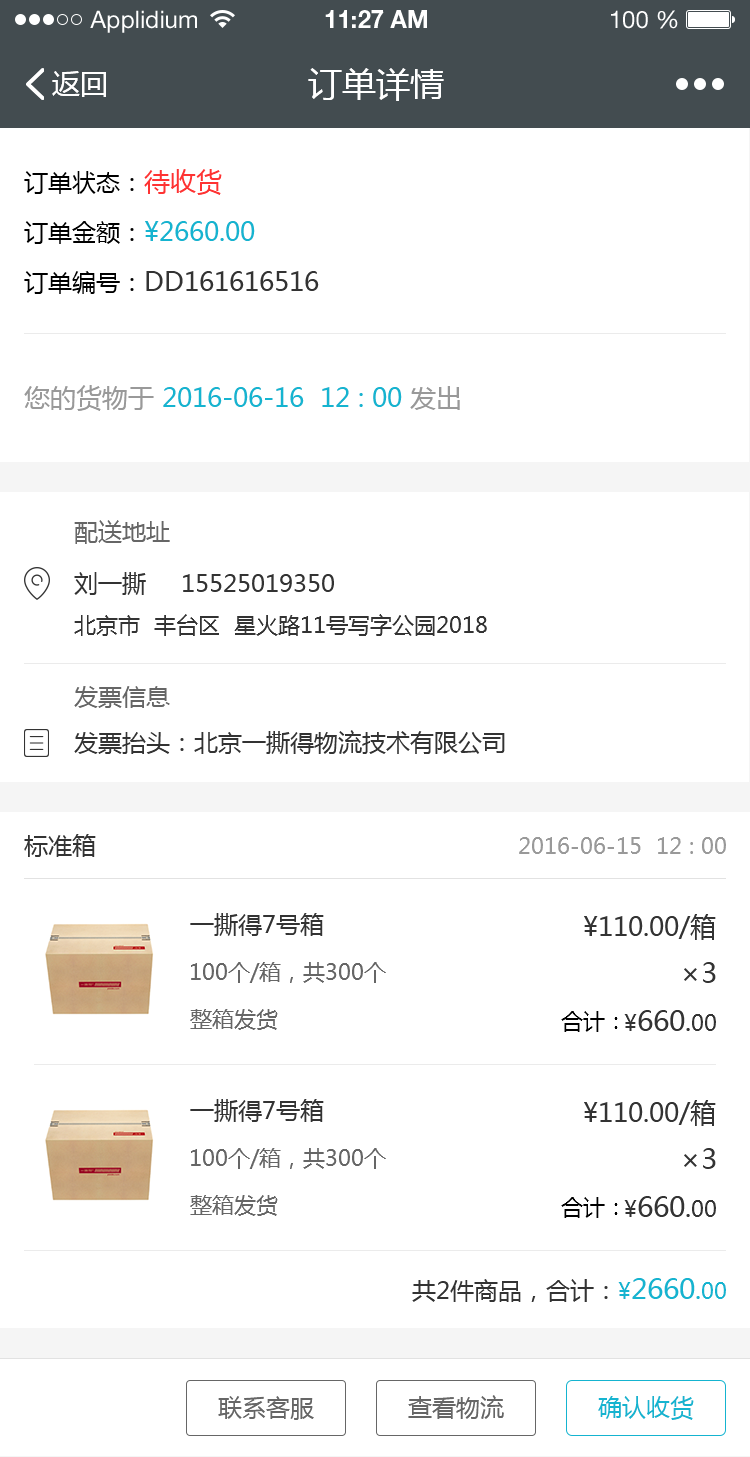
<style>
.page{position:relative;width:750px;height:1457px;background:#ffffff}
.page>*{position:absolute;margin:0}
.t1{font:24px "HelveticaNeueLTStd-Roman";color:#ffffff}
.t2{font:24px "HelveticaNeueLTStd-Bd";color:#ffffff}
.t3{font:28px "MicrosoftYaHei";color:#ffffff}
.t4{font:34px "MicrosoftYaHei";color:#ffffff}
.t5{font:26px/50px "MicrosoftYaHei";color:#333333}
.t6{font:24px/50px "MicrosoftYaHei";color:#000000}
.t7{font:26px/50px "MicrosoftYaHei";color:#fe3333}
.t8{font:26px/50px "MicrosoftYaHei";color:#15b4d0}
.t9{font:26px "MicrosoftYaHei";color:#15b4d0}
.t10{font:26px "MicrosoftYaHei";color:#999999}
.t11{font:24px "MicrosoftYaHei";color:#666666}
.t12{font:24px "MicrosoftYaHei";color:#333333}
.t13{font:22px "MicrosoftYaHei";color:#333333}
.t14{font:22px "MicrosoftYaHei";color:#999999}
.t15{font:26px "MicrosoftYaHei";color:#333333}
.t16{font:22px "MicrosoftYaHei";color:#666666}
.t17{font:28px "MicrosoftYaHei";color:#333333}
.t18{font:22px "MicrosoftYaHei";color:#000000}
.t19{font:22px "MicrosoftYaHei";color:#15b4d0}
.t20{font:28px "MicrosoftYaHei";color:#15b4d0}
.t21{font:24px "MicrosoftYaHei";color:#15b4d0}
</style>
<div class="page">
<p class="t1" style="left:90px;top:10px;width:107px;height:23px">Applidium</p>
<p class="t2" style="left:325px;top:10px;width:102px;height:18px">11:27 AM</p>
<p class="t1" style="left:611px;top:10px;width:67px;height:19px">100 %</p>
<p class="t3" style="left:52px;top:71px;width:54px;height:26px">返回</p>
<p class="t4" style="left:308px;top:68px;width:136px;height:33px">订单详情</p>
<p class="t5" style="left:24px;top:169px;width:295px;height:125px"><span class="t6">订单状态：</span><span class="t7">待收货<br></span><span class="t6">订单金额：</span><span class="t8">¥2660.00<br></span><span class="t6">订单编号：</span>DD161616516</p>
<p class="t9" style="left:24px;top:385px;width:436px;height:26px"><span class="t10">您的货物于 </span>2016-06-16  12 : 00 <span class="t10">发出</span></p>
<p class="t11" style="left:74px;top:520px;width:96px;height:24px">配送地址</p>
<p class="t12" style="left:74px;top:572px;width:260px;height:23px">刘一撕     15525019350</p>
<p class="t13" style="left:74px;top:614px;width:413px;height:22px">北京市  丰台区  星火路11号写字公园2018</p>
<p class="t11" style="left:74px;top:686px;width:96px;height:22px">发票信息</p>
<p class="t12" style="left:74px;top:730px;width:431px;height:24px">发票抬头：北京一撕得物流技术有限公司</p>
<p class="t12" style="left:24px;top:834px;width:72px;height:23px">标准箱</p>
<p class="t14" style="left:519px;top:837px;width:207px;height:17px">2016-06-15  12 : 00</p>
<p class="t12" style="left:190px;top:913px;width:134px;height:23px">一撕得7号箱</p>
<p class="t15" style="left:584px;top:914px;width:132px;height:26px">¥110.00/箱</p>
<p class="t16" style="left:191px;top:962px;width:195px;height:21px">100个/箱，共300个</p>
<p class="t17" style="left:684px;top:962px;width:32px;height:21px">×3</p>
<p class="t16" style="left:190px;top:1009px;width:88px;height:21px">整箱发货</p>
<p class="t18" style="left:561px;top:1011px;width:57px;height:21px">合计：</p>
<p class="t17" style="left:624px;top:1010px;width:92px;height:21px"><span class="t13">¥</span>660<span class="t15">.</span><span class="t13">00</span></p>
<p class="t12" style="left:190px;top:1099px;width:134px;height:23px">一撕得7号箱</p>
<p class="t15" style="left:584px;top:1100px;width:132px;height:26px">¥110.00/箱</p>
<p class="t16" style="left:191px;top:1148px;width:195px;height:21px">100个/箱，共300个</p>
<p class="t17" style="left:684px;top:1148px;width:32px;height:21px">×3</p>
<p class="t16" style="left:190px;top:1195px;width:88px;height:21px">整箱发货</p>
<p class="t18" style="left:561px;top:1197px;width:57px;height:21px">合计：</p>
<p class="t17" style="left:624px;top:1196px;width:92px;height:21px"><span class="t13">¥</span>660<span class="t15">.</span><span class="t13">00</span></p>
<p class="t12" style="left:412px;top:1278px;width:314px;height:24px">共2件商品，合计：<span class="t19">¥</span><span class="t20">2660</span><span class="t9">.</span><span class="t19">00</span></p>
<p class="t11" style="left:218px;top:1396px;width:96px;height:24px">联系客服</p>
<p class="t11" style="left:408px;top:1395px;width:96px;height:24px">查看物流</p>
<p class="t21" style="left:598px;top:1396px;width:96px;height:24px">确认收货</p>
</div>
